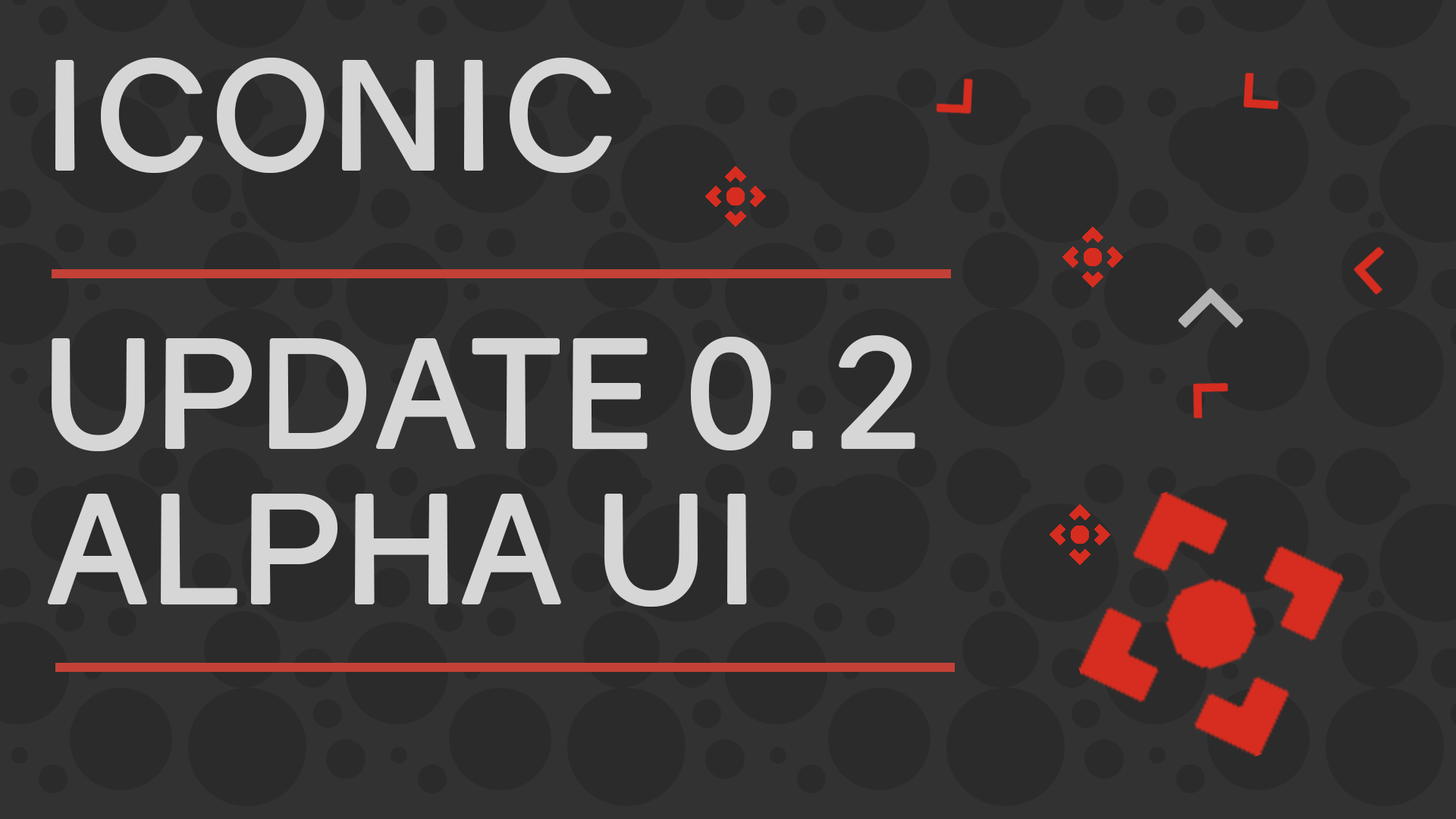
<style>
.page{position:relative;width:1456px;height:819px;background:#323232}
.page>*{position:absolute;margin:0}
.t1{font:151.7px "Gravity-Bold";color:#d6d6d6}
</style>
<div class="page">
<p class="t1" style="left:55px;top:58px;width:557px;height:115px">ICONIC</p>
<p class="t1" style="left:52px;top:335px;width:863px;height:116px">UPDATE 0.2</p>
<p class="t1" style="left:48px;top:494px;width:699px;height:113px">ALPHA UI</p>
</div>
